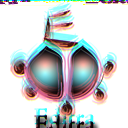
<style>
.page{position:relative;width:128px;height:128px;background:#ffffff}
.page>*{position:absolute;margin:0}
.t1{font:24px "AJensonPro-Bold"}
</style>
<div class="page">
<p class="t1" style="left:34px;top:106px;width:61px;height:18px">Editra</p>
</div>
